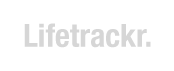
<style>
.page{position:relative;width:174px;height:71px;background:#ffffff}
.page>*{position:absolute;margin:0}
.t1{font:32px "HelveticaNeueLTStd-BdCn";color:#d6d6d6}
</style>
<div class="page">
<p class="t1" style="left:24px;top:23px;width:127px;height:25px">Lifetrackr.</p>
</div>
